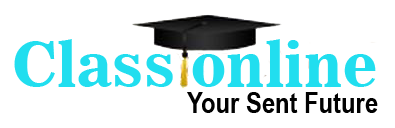
<style>
.page{position:relative;width:395px;height:128px;background:#ffffff}
.page>*{position:absolute;margin:0}
.t1{font:62px "News706BT-BoldC";color:#21deef}
.t2{font:29px "ArialNarrow-Bold";color:#010101}
</style>
<div class="page">
<p class="t1" style="left:14px;top:39px;width:362px;height:48px">Class online</p>
<p class="t2" style="left:187px;top:92px;width:191px;height:21px">Your Sent Future</p>
</div>
